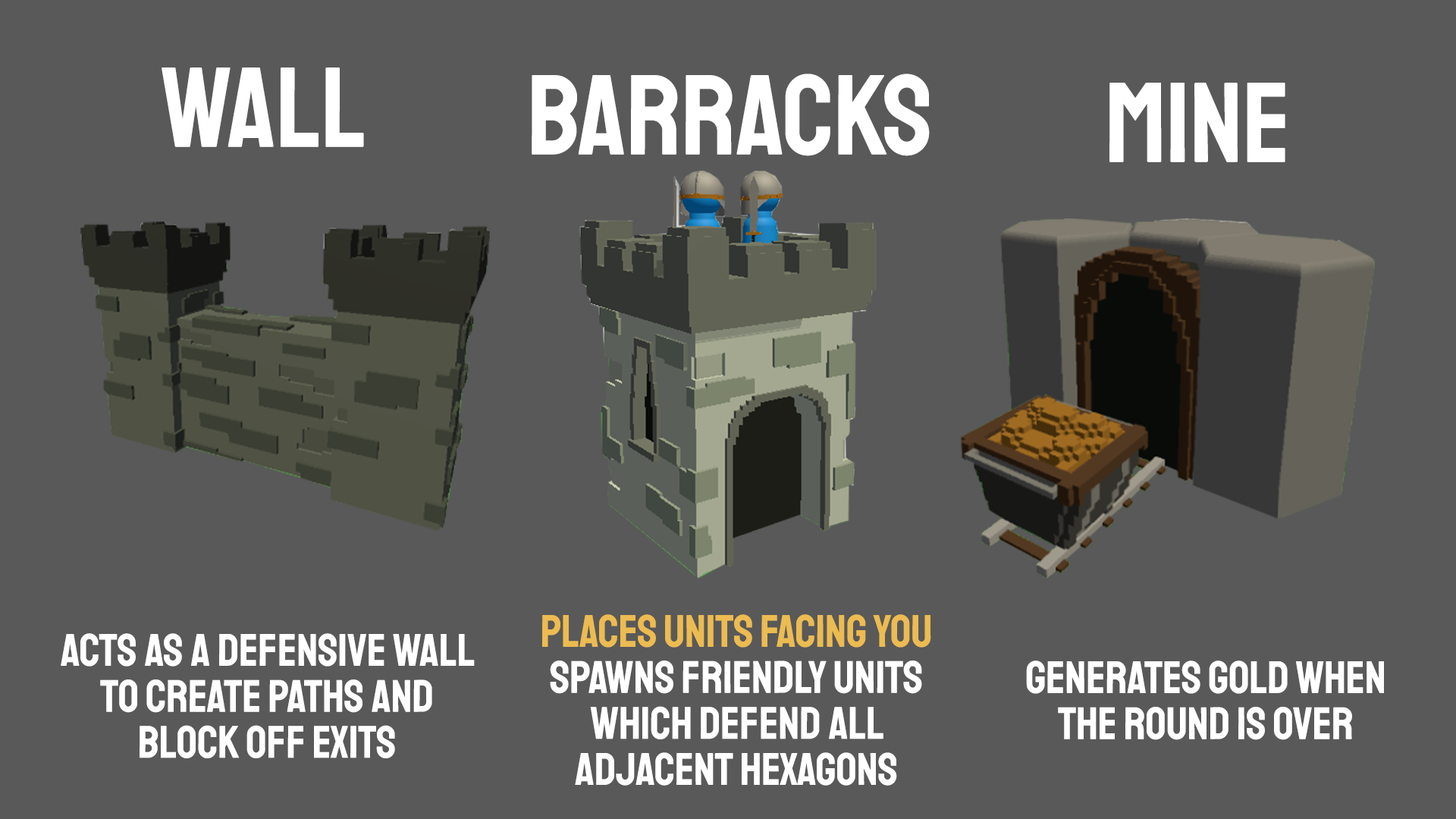
<style>
.page{position:relative;width:1456px;height:819px;background:#595959}
.page>*{position:absolute;margin:0}
.t1{font:113.7px "Staatliches-Regular";color:#ffffff}
.t2{font:45.5px/46px "Staatliches-Regular";color:#ffffff}
.t3{font:45.5px/46px "Staatliches-Regular";color:#ecbb51}
</style>
<div class="page">
<p class="t1" style="left:162px;top:67px;width:202px;height:80px">Wall</p>
<p class="t1" style="left:532px;top:74px;width:398px;height:82px">Barracks</p>
<p class="t1" style="left:1109px;top:83px;width:176px;height:79px">Mine</p>
<p class="t2" style="left:542px;top:614px;width:389px;height:172px;text-align:center"><span class="t3">PLACES UNITS FACING YOU<br></span>spawns friendly units which defend all adjacent hexagons</p>
<p class="t2" style="left:61px;top:633px;width:414px;height:125px;text-align:center">Acts as a defensive wall to create paths and block off exits</p>
<p class="t2" style="left:1026px;top:660px;width:358px;height:80px;text-align:center">Generates gold when the round is over</p>
</div>
